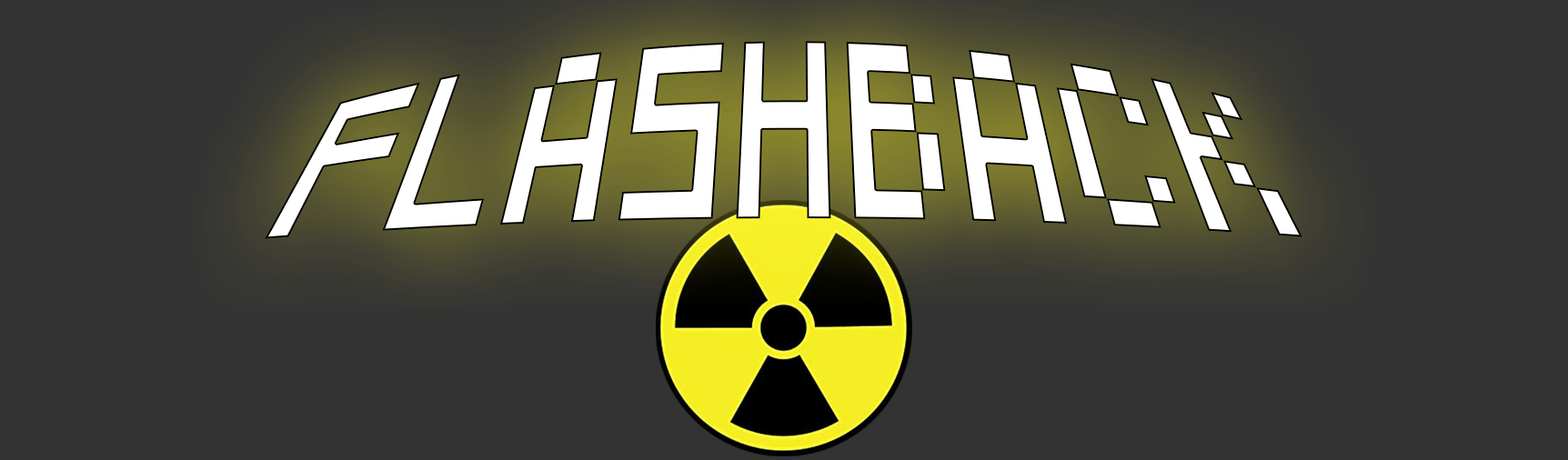
<style>
.page{position:relative;width:1568px;height:460px;background:#333333}
.page>*{position:absolute;margin:0}
.t1{font:113.7px "Pixeled";color:#ffffff}
</style>
<div class="page">
<p class="t1" style="left:265px;top:41px;width:1037px;height:198px">FLASHBACK</p>
</div>
